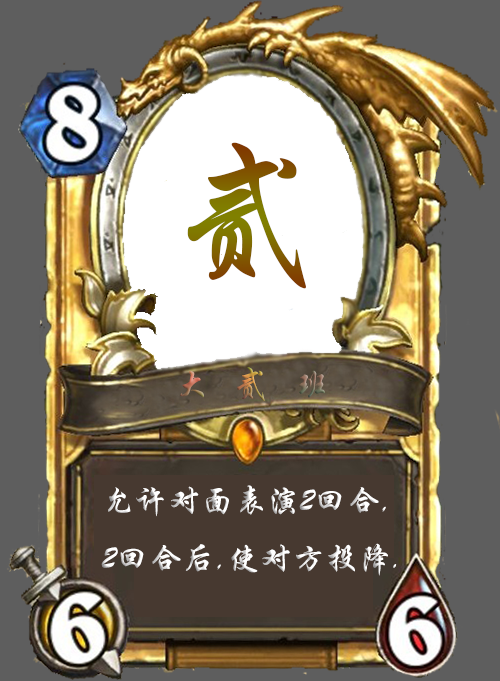
<style>
.page{position:relative;width:500px;height:681px;background:#5e5e5e}
.page>*{position:absolute;margin:0}
.t1{font:150px "STXingkai"}
.t2{font:35px "STXingkai"}
.t3{font:33px "STXingkai";color:#ffffff}
</style>
<div class="page">
<p class="t1" style="left:187px;top:142px;width:119px;height:147px">贰</p>
<p class="t2" style="left:180px;top:367px;width:145px;height:34px">大   贰   班</p>
<p class="t3" style="left:101px;top:485px;width:296px;height:91px">允许对面表演2回合,<br>2回合后,使对方投降.</p>
</div>
